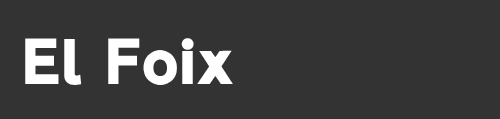
<style>
.page{position:relative;width:500px;height:119px;background:#333333}
.page>*{position:absolute;margin:0}
.t1{font:64px "Ccrige-Regular";color:#ffffff}
</style>
<div class="page">
<p class="t1" style="left:25px;top:38px;width:208px;height:47px">El Foix</p>
</div>
